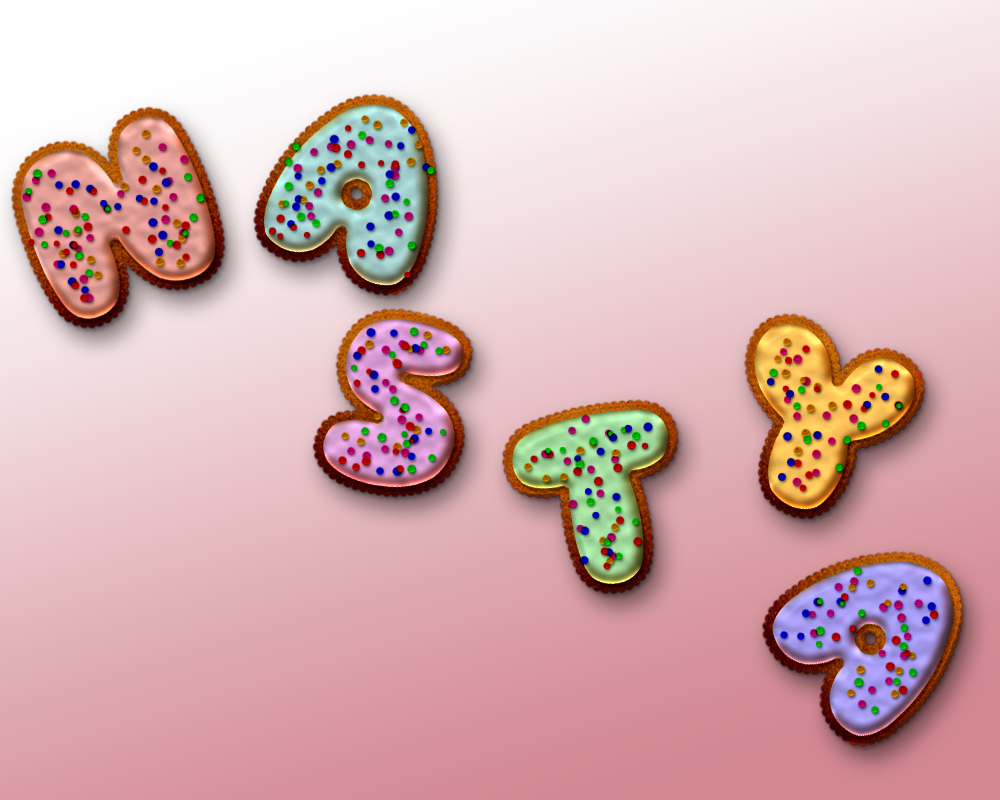
<style>
.page{position:relative;width:1000px;height:800px}
.page>*{position:absolute;margin:0}
.t1{font:250px "Sniglet"}
</style>
<div class="page">
<p class="t1" style="left:258px;top:99px;width:176px;height:192px;rotate:21deg">A</p>
<p class="t1" style="left:15px;top:111px;width:205px;height:214px;rotate:-23deg">N</p>
<p class="t1" style="left:749px;top:319px;width:172px;height:196px;rotate:19deg">Y</p>
<p class="t1" style="left:507px;top:404px;width:167px;height:186px;rotate:-11deg">T</p>
</div>
